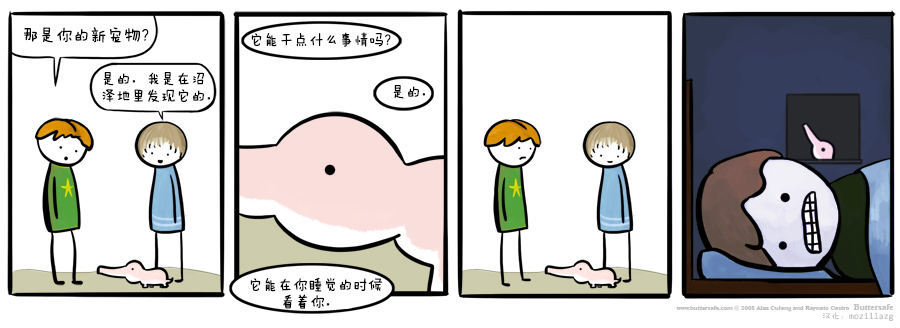
<style>
.page{position:relative;width:900px;height:328px;background:#ffffff}
.page>*{position:absolute;margin:0}
.t1{font:17px "FZMWJW--GB1-0";color:#000000}
.t2{font:15px "FZMWJW--GB1-0";color:#000000}
.t3{font:15px/17px "FZMWJW--GB1-0";color:#000000}
.t4{font:9px "YaHei-Consolas-Hybrid";color:#c3c3c3}
.t5{font:9px "FZMWJW--GB1-0";color:#c3c3c3}
</style>
<div class="page">
<p class="t1" style="left:24px;top:27px;width:125px;height:16px">那是你的新宠物？</p>
<p class="t2" style="left:251px;top:32px;width:140px;height:15px">它能干点什么事情吗？</p>
<p class="t3" style="left:102px;top:72px;width:108px;height:30px">是的。我是在沼<br>泽地里发现它的。</p>
<p class="t2" style="left:393px;top:85px;width:32px;height:14px">是的。</p>
<p class="t3" style="left:250px;top:277px;width:133px;height:32px">它能在你睡觉的时候<br>      看着你。</p>
<p class="t4" style="left:822px;top:312px;width:72px;height:9px"><span class="t5">汉化：</span>mozillazg</p>
</div>
